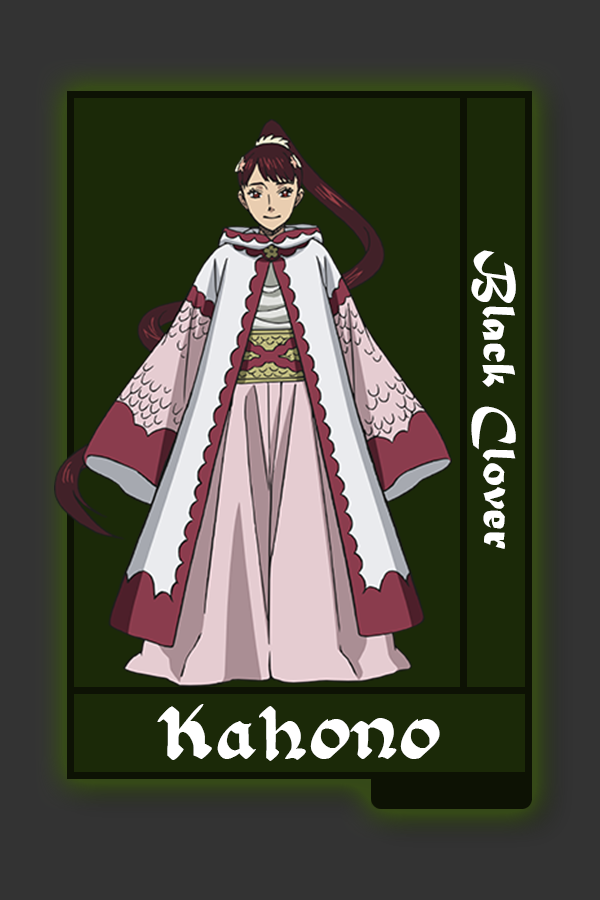
<style>
.page{position:relative;width:600px;height:900px;background:#1b2908}
.page>*{position:absolute;margin:0}
.t1{font:48.8px "MaturaMTScriptCapitals";color:#ffffff}
.t2{font:64.6px "FloranteatLaura";color:#ffffff}
</style>
<div class="page">
<p class="t1" style="left:471px;top:250px;width:45px;height:299px;rotate:90deg">Black Clover</p>
<p class="t2" style="left:157px;top:704px;width:283px;height:57px">Kahono</p>
</div>
